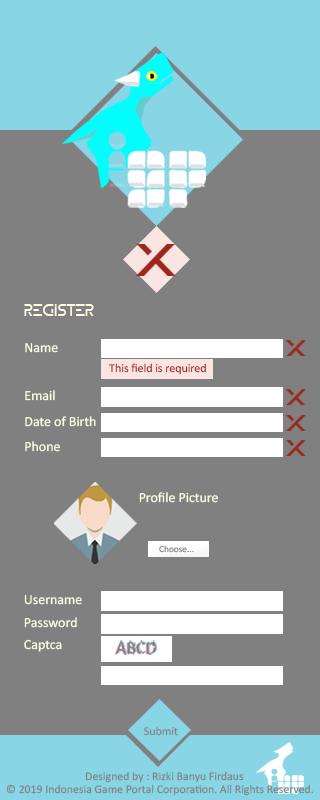
<style>
.page{position:relative;width:320px;height:800px;background:#808080}
.page>*{position:absolute;margin:0}
.t1{font:16.7px "ZELDA";color:#ffffe5}
.t2{font:13.9px "Calibri";color:#ffffe5}
.t3{font:11.9px "Calibri";color:#9d261d}
.t4{font:9.3px "Calibri";color:#808080}
.t5{font:11.9px "Calibri";color:#808080}
.t6{font:11.8px "Calibri";color:#808080}
</style>
<div class="page">
<p class="t1" style="left:24px;top:304px;width:70px;height:12px">Register</p>
<p class="t2" style="left:25px;top:343px;width:33px;height:10px">Name</p>
<p class="t3" style="left:108px;top:363px;width:98px;height:12px">This field is required</p>
<p class="t2" style="left:25px;top:390px;width:30px;height:11px">Email</p>
<p class="t2" style="left:25px;top:416px;width:71px;height:11px">Date of Birth</p>
<p class="t2" style="left:25px;top:441px;width:35px;height:11px">Phone</p>
<p class="t2" style="left:139px;top:492px;width:79px;height:11px">Profile Picture</p>
<p class="t4" style="left:159px;top:545px;width:35px;height:8px">Choose...</p>
<p class="t2" style="left:24px;top:594px;width:58px;height:11px">Username</p>
<p class="t2" style="left:24px;top:617px;width:53px;height:11px">Password</p>
<p class="t2" style="left:24px;top:639px;width:38px;height:13px">Captca</p>
<p class="t5" style="left:144px;top:726px;width:34px;height:10px">Submit</p>
<p class="t6" style="left:85px;top:771px;width:159px;height:12px">Designed by : Rizki Banyu Firdaus</p>
<p class="t6" style="left:6px;top:784px;width:307px;height:12px">© 2019 Indonesia Game Portal Corporation. All Rights Reserved.</p>
</div>
